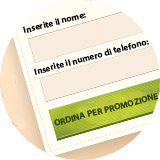
<style>
.page{position:relative;width:160px;height:160px;background:#fffcf4}
.page>*{position:absolute;margin:0}
.t1{font:9px "MyriadPro-Bold";color:#000000}
.t2{font:9px "MyriadPro-Bold";color:#304207}
</style>
<div class="page">
<p class="t1" style="left:23px;top:13px;width:63px;height:20px;rotate:-15deg">Inserite il nome:</p>
<p class="t1" style="left:34px;top:40px;width:115px;height:35px;rotate:-15deg">Inserite il numero di telefono:</p>
<p class="t2" style="left:54px;top:93px;width:105px;height:33px;rotate:-15deg">ORDINA PER PROMOZIONE</p>
</div>
